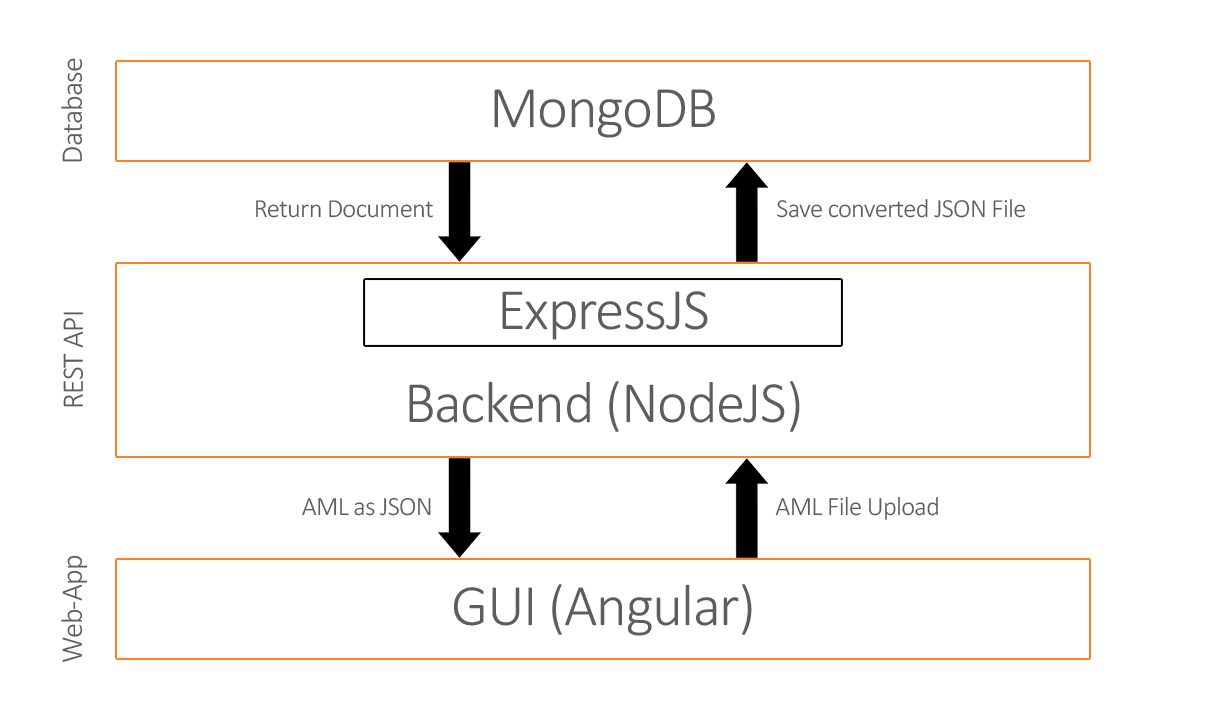
<style>
.page{position:relative;width:1206px;height:720px;background:#ffffff}
.page>*{position:absolute;margin:0}
.t1{font:30px "Calibri-Light";letter-spacing:-0.025em;color:#5c5d5f}
.t2{font:59.2px "Calibri-Light";letter-spacing:-0.025em;color:#5c5d5f}
.t3{font:26.3px "Calibri-Light";letter-spacing:-0.025em;color:#5c5d5f}
.t4{font:59.1px "Calibri-Light";letter-spacing:-0.025em;color:#5c5d5f}
.t5{font:26.4px "Calibri-Light";letter-spacing:-0.025em;color:#5c5d5f}
</style>
<div class="page">
<p class="t1" style="left:61px;top:58px;width:22px;height:104px;rotate:-90deg">Database</p>
<p class="t2" style="left:494px;top:89px;width:221px;height:49px">MongoDB</p>
<p class="t3" style="left:256px;top:200px;width:177px;height:18px">Return Document</p>
<p class="t3" style="left:777px;top:199px;width:249px;height:19px">Save converted JSON File</p>
<p class="t4" style="left:502px;top:291px;width:206px;height:49px">ExpressJS</p>
<p class="t1" style="left:63px;top:312px;width:21px;height:95px;rotate:-90deg">REST API</p>
<p class="t4" style="left:409px;top:381px;width:391px;height:51px">Backend (NodeJS)</p>
<p class="t5" style="left:302px;top:497px;width:129px;height:19px">AML as JSON</p>
<p class="t5" style="left:775px;top:496px;width:163px;height:24px">AML File Upload</p>
<p class="t1" style="left:61px;top:555px;width:27px;height:107px;rotate:-90deg">Web-App</p>
<p class="t4" style="left:454px;top:584px;width:298px;height:52px">GUI (Angular)</p>
</div>
